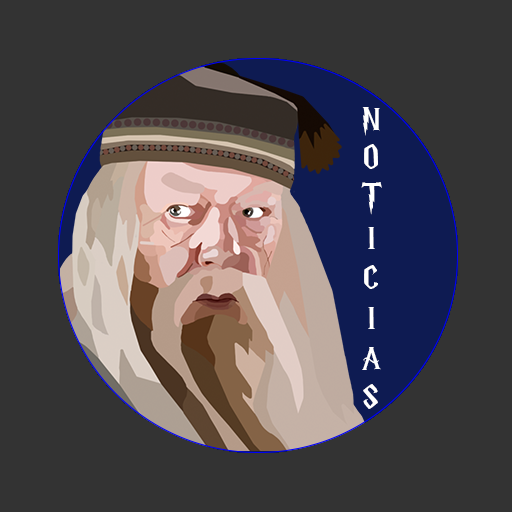
<style>
.page{position:relative;width:512px;height:512px;background:#333333}
.page>*{position:absolute;margin:0}
.t1{font:33.3px "HarryP";color:#ffffff}
</style>
<div class="page">
<p class="t1" style="left:361px;top:107px;width:21px;height:302px;text-align:center">N <br>O<br>T <br>I<br>C <br>I<br>A <br>S</p>
</div>
